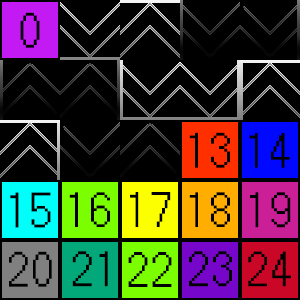
<style>
.page{position:relative;width:300px;height:300px;background:#000000}
.page>*{position:absolute;margin:0}
.t1{font:48px "JF-Dot-Ayu-18";color:#000000}
</style>
<div class="page">
<p class="t1" style="left:20px;top:12px;width:20px;height:36px">0</p>
<p class="t1" style="left:189px;top:132px;width:41px;height:36px">13</p>
<p class="t1" style="left:249px;top:133px;width:41px;height:35px">14</p>
<p class="t1" style="left:10px;top:192px;width:41px;height:36px">15</p>
<p class="t1" style="left:69px;top:192px;width:41px;height:35px">16</p>
<p class="t1" style="left:130px;top:192px;width:41px;height:35px">17</p>
<p class="t1" style="left:189px;top:192px;width:41px;height:35px">18</p>
<p class="t1" style="left:250px;top:192px;width:41px;height:36px">19</p>
<p class="t1" style="left:9px;top:251px;width:43px;height:36px">20</p>
<p class="t1" style="left:72px;top:251px;width:36px;height:36px">21</p>
<p class="t1" style="left:128px;top:252px;width:44px;height:35px">22</p>
<p class="t1" style="left:189px;top:251px;width:43px;height:36px">23</p>
<p class="t1" style="left:248px;top:251px;width:43px;height:36px">24</p>
</div>
